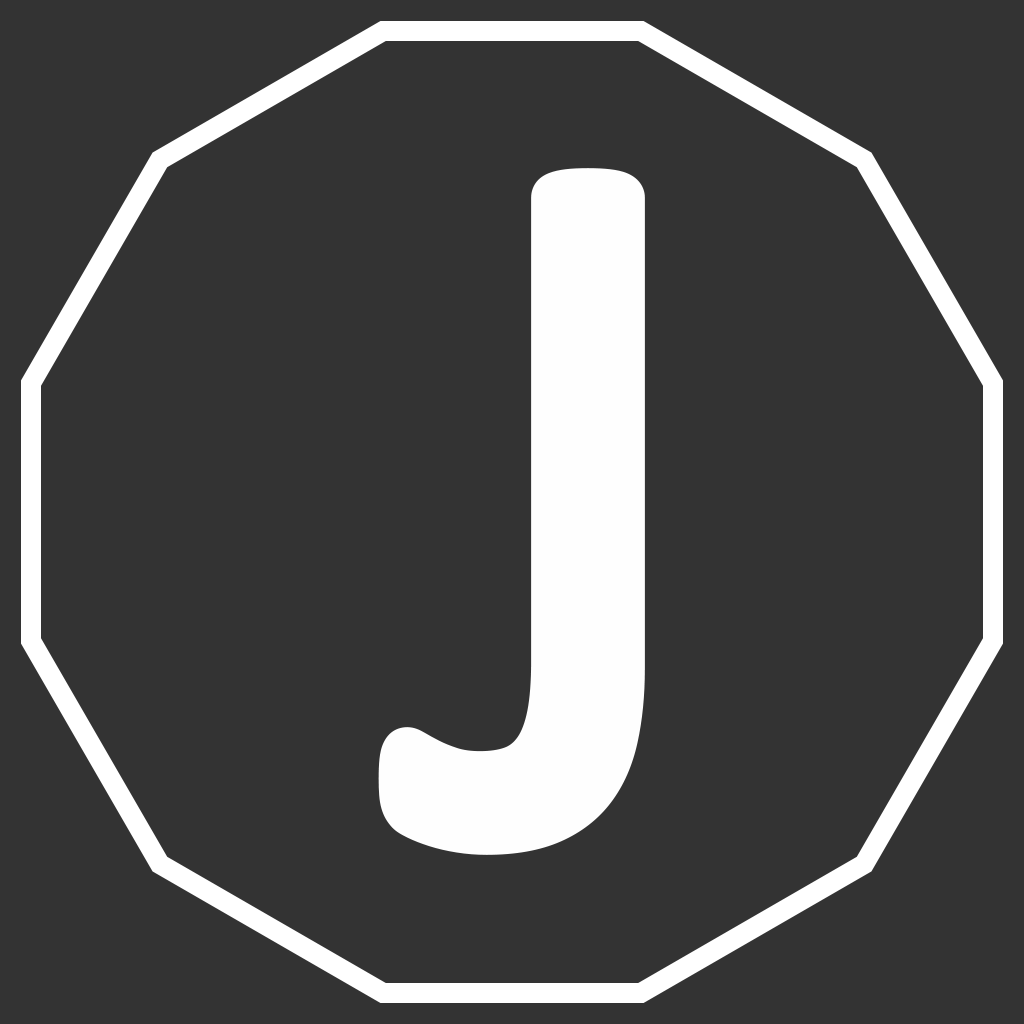
<style>
.page{position:relative;width:1024px;height:1024px;background:#333333}
.page>*{position:absolute;margin:0}
.t1{font:1024px "Calibri";color:#fefefe;font-weight:bold}
</style>
<div class="page">
<p class="t1" style="left:378px;top:168px;width:267px;height:687px">J</p>
</div>
